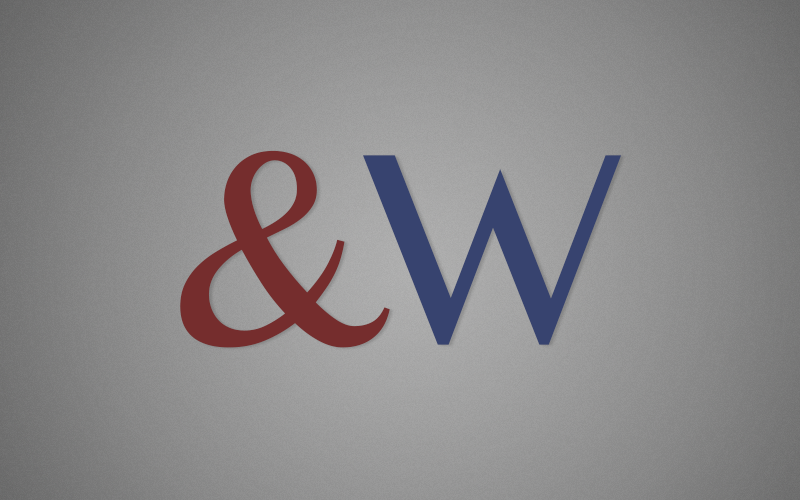
<style>
.page{position:relative;width:800px;height:500px}
.page>*{position:absolute;margin:0}
.t1{font:275.8px "GurmukhiMN";letter-spacing:-0.1em;color:#752d2d}
.t2{font:275.8px "GurmukhiMN";letter-spacing:-0.1em;color:#37436f}
</style>
<div class="page">
<p class="t1" style="left:180px;top:150px;width:442px;height:198px">&amp;<span class="t2">W</span></p>
</div>
